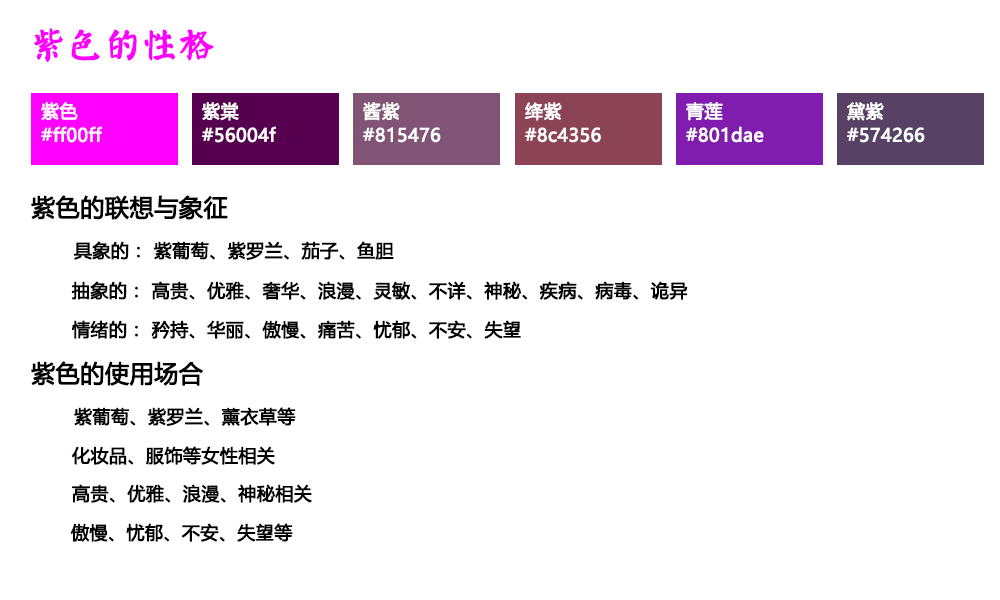
<style>
.page{position:relative;width:1000px;height:600px;background:#ffffff}
.page>*{position:absolute;margin:0}
.t1{font:36px "øów·»îów©I";color:#ff00ff;font-weight:bold}
.t2{font:18px/24px "MicrosoftYaHei";color:#fbf9f9;font-weight:bold}
.t3{font:18px/24px "MicrosoftYaHei";color:#fcfcfc;font-weight:bold}
.t4{font:18px/24px "MicrosoftYaHei";color:#fdfdfd;font-weight:bold}
.t5{font:18px/24px "MicrosoftYaHei";color:#fefdfd;font-weight:bold}
.t6{font:18px/24px "MicrosoftYaHei";color:#fefefe;font-weight:bold}
.t7{font:18px/24px "MicrosoftYaHei";color:#ffffff;font-weight:bold}
.t8{font:24px "MicrosoftYaHei";color:#000000;font-weight:bold}
.t9{font:18px "MicrosoftYaHei";color:#000000;font-weight:bold}
</style>
<div class="page">
<p class="t1" style="left:34px;top:28px;width:180px;height:34px">紫色的性格</p>
<p class="t2" style="left:41px;top:102px;width:61px;height:41px">紫色<br>#ff00ff</p>
<p class="t3" style="left:202px;top:102px;width:74px;height:41px">紫棠<br>#56004f</p>
<p class="t4" style="left:363px;top:102px;width:78px;height:41px">酱紫<br>#815476</p>
<p class="t5" style="left:525px;top:102px;width:76px;height:41px">绛紫<br>#8c4356</p>
<p class="t6" style="left:686px;top:102px;width:78px;height:41px">青莲<br>#801dae</p>
<p class="t7" style="left:847px;top:102px;width:78px;height:41px">黛紫<br>#574266</p>
<p class="t8" style="left:31px;top:195px;width:197px;height:25px">紫色的联想与象征</p>
<p class="t9" style="left:74px;top:241px;width:320px;height:19px">具象的： 紫葡萄、紫罗兰、茄子、鱼胆</p>
<p class="t9" style="left:71px;top:281px;width:617px;height:19px">抽象的： 高贵、优雅、奢华、浪漫、灵敏、不详、神秘、疾病、病毒、诡异</p>
<p class="t9" style="left:72px;top:320px;width:449px;height:19px">情绪的： 矜持、华丽、傲慢、痛苦、忧郁、不安、失望</p>
<p class="t8" style="left:31px;top:361px;width:172px;height:25px">紫色的使用场合</p>
<p class="t9" style="left:74px;top:407px;width:222px;height:19px">紫葡萄、紫罗兰、薰衣草等</p>
<p class="t9" style="left:71px;top:446px;width:204px;height:19px">化妆品、服饰等女性相关</p>
<p class="t9" style="left:72px;top:484px;width:240px;height:19px">高贵、优雅、浪漫、神秘相关</p>
<p class="t9" style="left:70px;top:523px;width:223px;height:19px">傲慢、忧郁、不安、失望等</p>
</div>
